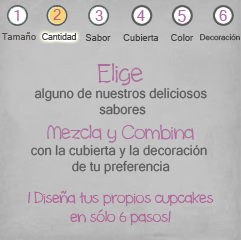
<style>
.page{position:relative;width:241px;height:240px}
.page>*{position:absolute;margin:0}
.t1{font:14.7px "MicrosoftSansSerif";color:#ae6b9b}
.t2{font:16px "MicrosoftSansSerif";color:#ae6b9b}
.t3{font:9.3px "MicrosoftSansSerif";color:#544e4e}
.t4{font:8.7px "MicrosoftSansSerif";color:#454545}
.t5{font:9.3px "MicrosoftSansSerif";color:#454545}
.t6{font:8px "MicrosoftSansSerif";color:#454545}
.t7{font:13.5px "MicrosoftSansSerif";color:#5d5d5d}
.t8{font:27px "cinnamoncake";color:#ae6b9b}
.t9{font:13.5px "MicrosoftSansSerif";color:#5c5c5c}
.t10{font:20.2px "cinnamoncake";color:#ae6b9b}
.t11{font:15.7px "cinnamoncake";color:#b16498}
</style>
<div class="page">
<p class="t1" style="left:14px;top:10px;width:5px;height:11px">1</p>
<p class="t1" style="left:53px;top:9px;width:8px;height:11px">2</p>
<p class="t1" style="left:95px;top:10px;width:8px;height:11px">3</p>
<p class="t1" style="left:137px;top:10px;width:8px;height:11px">4</p>
<p class="t2" style="left:178px;top:10px;width:8px;height:12px">5</p>
<p class="t1" style="left:219px;top:10px;width:8px;height:11px">6</p>
<p class="t3" style="left:2px;top:32px;width:34px;height:8px">Tamaño</p>
<p class="t4" style="left:42px;top:33px;width:34px;height:7px">Cantidad</p>
<p class="t5" style="left:85px;top:34px;width:26px;height:7px">Sabor</p>
<p class="t5" style="left:123px;top:34px;width:35px;height:7px">Cubierta</p>
<p class="t5" style="left:171px;top:34px;width:23px;height:7px">Color</p>
<p class="t6" style="left:200px;top:34px;width:40px;height:7px">Decoración</p>
<p class="t7" style="left:28px;top:63px;width:186px;height:163px;text-align:center"><span class="t8">Elige<br></span><span class="t9">alguno de nuestros deliciosos<br> sabores<br></span><span class="t10">Mezcla y Combina<br></span>con la cubierta y la decoración <br>de tu preferencia<br><br><span class="t11">¡ Diseña tus propios cupcakes<br>en sólo 6 pasos!</span></p>
</div>
